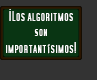
<style>
.page{position:relative;width:97px;height:80px;background:#333333}
.page>*{position:absolute;margin:0}
.t1{font:12.1px "SFMoviePoster";color:#ffffff;scale:1.04 1}
.t2{font:14.8px "SFMoviePoster";color:#ffffff;scale:1.04 1}
.t3{font:11.2px "SFMoviePoster";color:#ffffff;scale:1.04 1}
.t4{font:14px "SFMoviePoster";color:#ffffff;scale:1.04 1}
</style>
<div class="page">
<p class="t1" style="left:6px;top:9px;width:70px;height:45px;text-align:center">Los algoritmos<span class="t2">¡ <br></span><span class="t3">son</span> <br>importantísimos<span class="t4">!</span> d</p>
</div>
